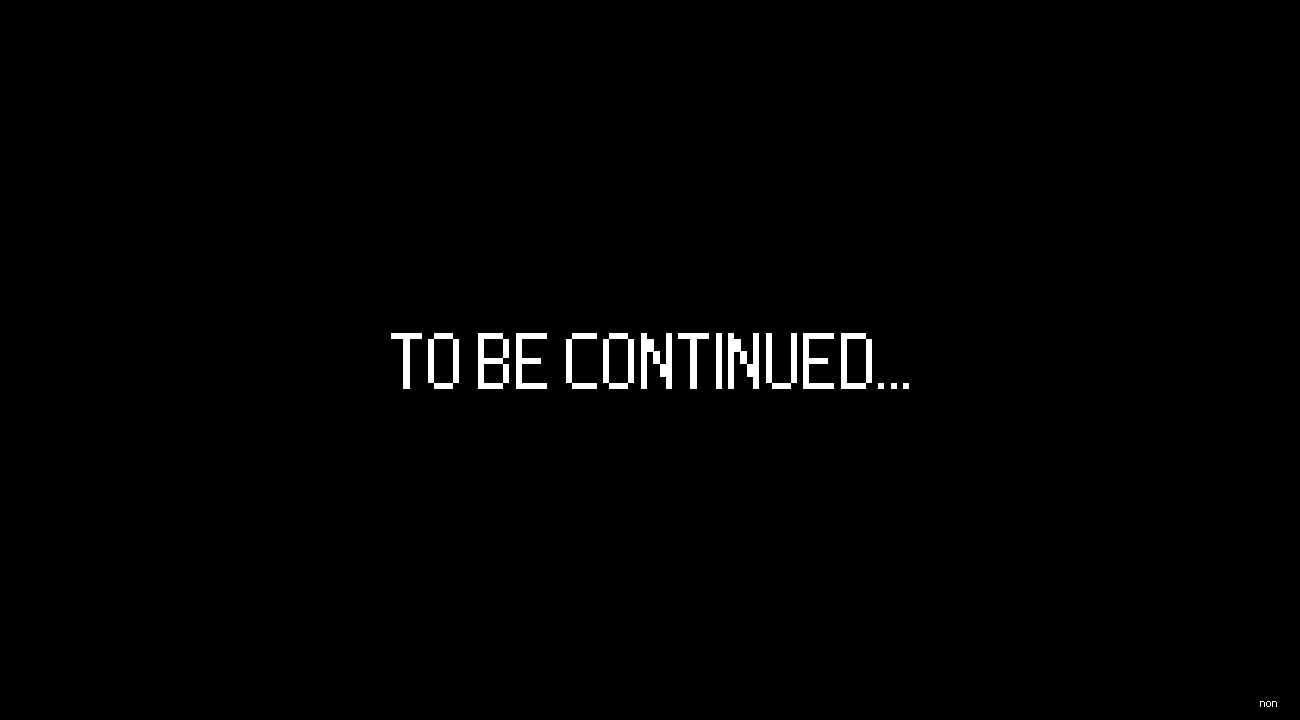
<style>
.page{position:relative;width:1300px;height:720px;background:#000000}
.page>*{position:absolute;margin:0}
.t1{font:100px "Nine-By-Five-NBP";color:#ffffff}
.t2{font:16px "Nine-By-Five-NBP";color:#ffffff}
</style>
<div class="page">
<p class="t1" style="left:391px;top:333px;width:518px;height:56px">TO BE CONTINUED...</p>
<p class="t2" style="left:1260px;top:701px;width:17px;height:6px">non</p>
</div>
